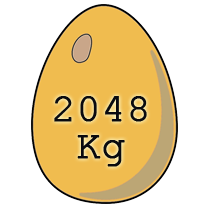
<style>
.page{position:relative;width:208px;height:208px;background:#ffffff}
.page>*{position:absolute;margin:0}
.t1{font:40px/30px "CourierNewPSMT";color:#090a0f;font-weight:bold}
.t2{font:40px/48px "CourierNewPSMT";color:#090a0f;font-weight:bold}
</style>
<div class="page">
<p class="t1" style="left:54px;top:96px;width:93px;height:71px;text-align:center"><span class="t2">20</span>48<br>Kg</p>
</div>
